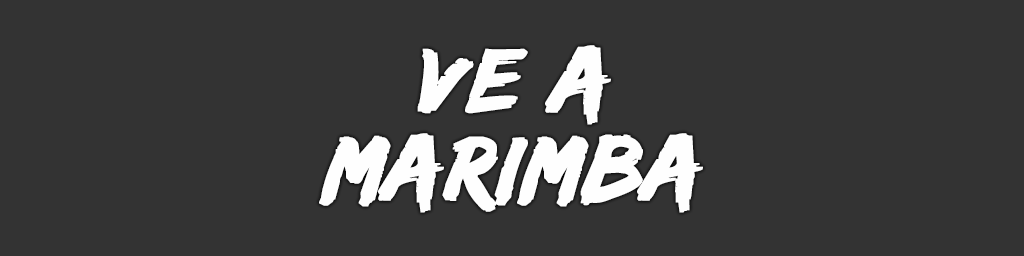
<style>
.page{position:relative;width:1024px;height:256px;background:#333333}
.page>*{position:absolute;margin:0}
.t1{font:94px/88px "EdoSZ";color:#fefefe;font-weight:bold;font-style:italic;scale:1.04 1}
</style>
<div class="page">
<p class="t1" style="left:319px;top:45px;width:384px;height:168px;text-align:center">ve a<br>marimba</p>
</div>
